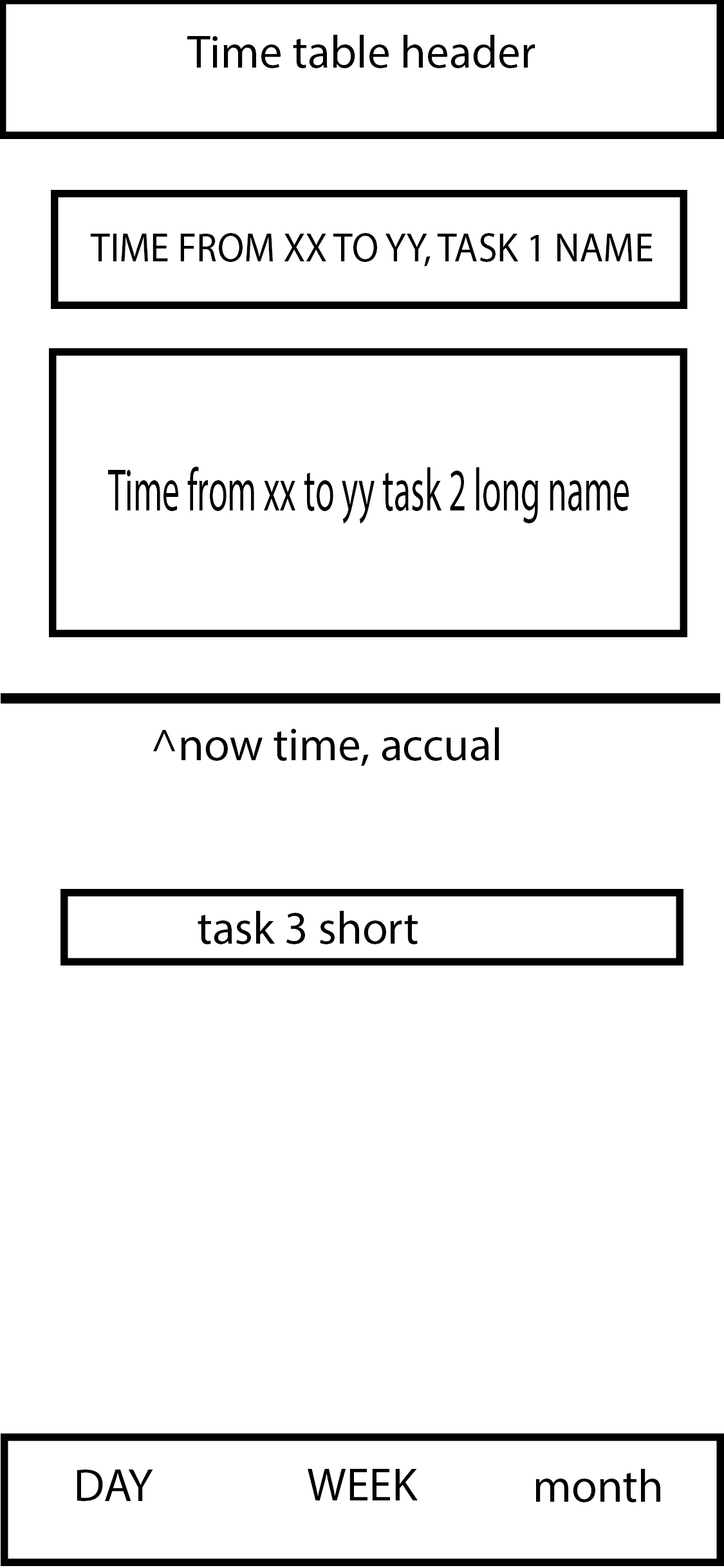
<style>
.page{position:relative;width:724px;height:1568px;background:#ffffff}
.page>*{position:absolute;margin:0}
.t1{font:46.3px "MyriadPro-Regular";color:#000000}
.t2{font:41px "MyriadPro-Regular";color:#000000;scale:0.94 1}
.t3{font:60.6px "MyriadPro-Regular";color:#000000;scale:0.58 1}
</style>
<div class="page">
<p class="t1" style="left:187px;top:35px;width:349px;height:33px">Time table header</p>
<p class="t2" style="left:90px;top:233px;width:563px;height:33px">TIME FROM XX TO YY, TASK 1 NAME</p>
<p class="t3" style="left:108px;top:467px;width:521px;height:57px">Time from xx to yy task 2 long name</p>
<p class="t1" style="left:153px;top:727px;width:346px;height:39px">^now time, accual</p>
<p class="t1" style="left:198px;top:911px;width:220px;height:33px">task 3 short</p>
<p class="t1" style="left:77px;top:1470px;width:76px;height:31px">DAY</p>
<p class="t1" style="left:308px;top:1469px;width:110px;height:31px">WEEK</p>
<p class="t1" style="left:536px;top:1469px;width:124px;height:33px">month</p>
</div>
